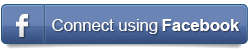
<style>
.page{position:relative;width:250px;height:49px;background:#6a85b5}
.page>*{position:absolute;margin:0}
.t1{font:16.7px "ArialMT";color:#ffffff}
.t2{font:16.7px "Arial-BoldMT";color:#ffffff}
</style>
<div class="page">
<p class="t1" style="left:52px;top:19px;width:106px;height:15px">Connect using</p>
<p class="t2" style="left:162px;top:19px;width:77px;height:12px">Facebook</p>
</div>
